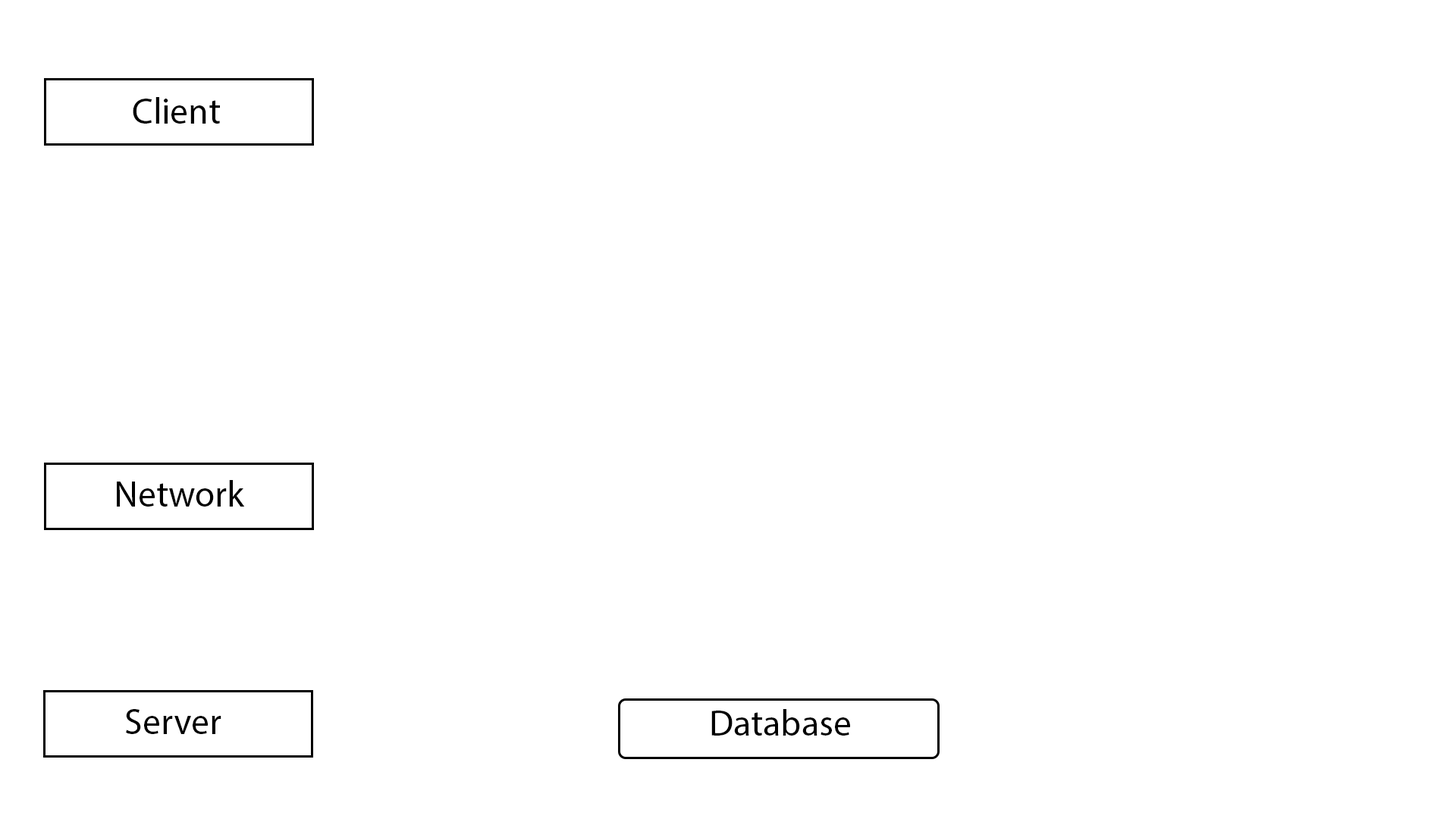
<style>
.page{position:relative;width:1456px;height:819px;background:#ffffff}
.page>*{position:absolute;margin:0}
.t1{font:36.4px "MyriadPro-Regular";color:#000000}
</style>
<div class="page">
<p class="t1" style="left:133px;top:97px;width:87px;height:27px">Client</p>
<p class="t1" style="left:117px;top:480px;width:128px;height:27px">Network</p>
<p class="t1" style="left:126px;top:709px;width:95px;height:25px">Server</p>
<p class="t1" style="left:711px;top:709px;width:139px;height:27px">Database</p>
</div>
